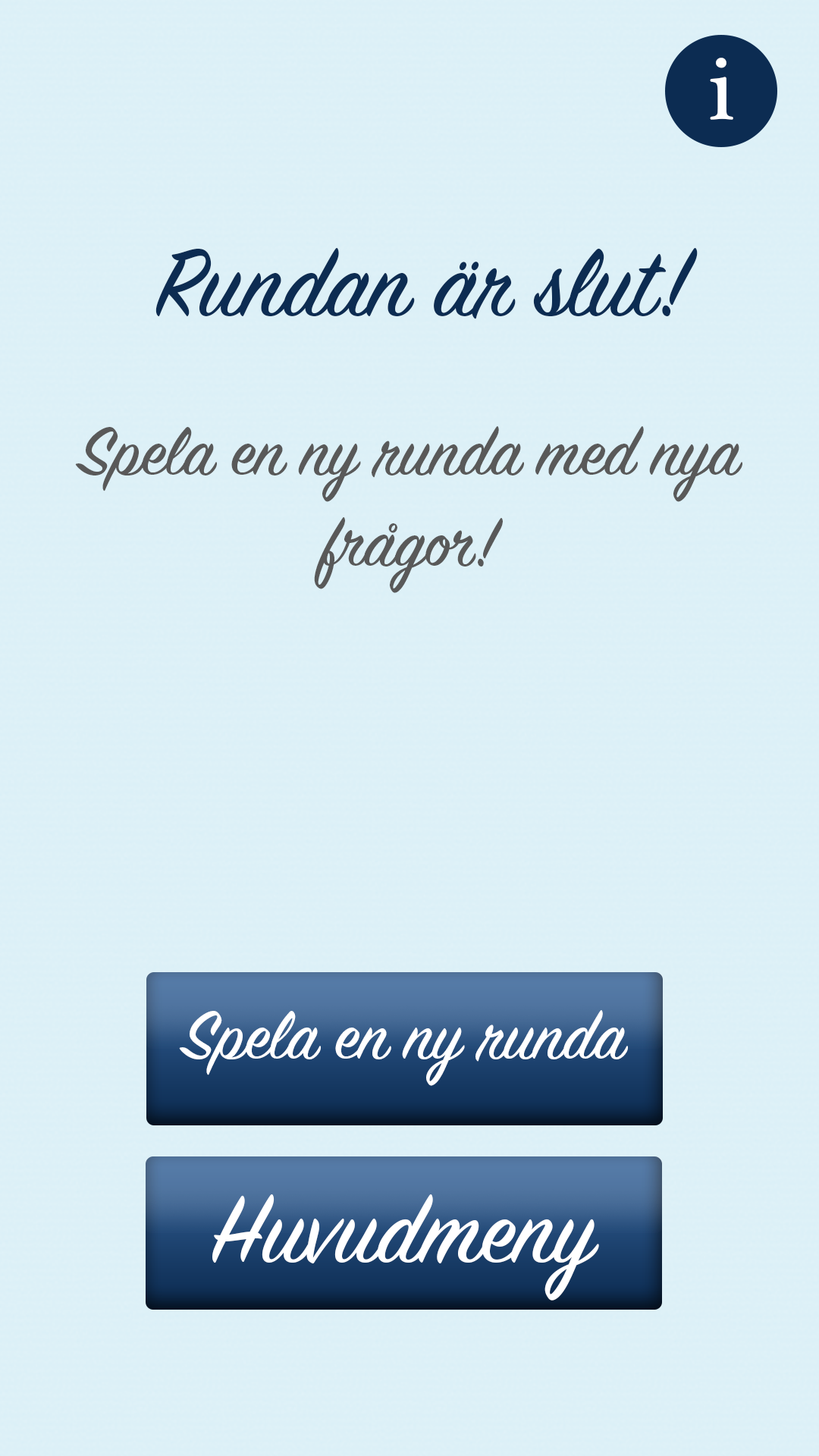
<style>
.page{position:relative;width:819px;height:1456px;background:#dcf0f7}
.page>*{position:absolute;margin:0}
.t1{font:91px "PlantagenetCherokee";color:#ffffff}
.t2{font:106.2px "SignPainter-HouseScript";color:#0c2c52}
.t3{font:75.8px "SignPainter-HouseScript";color:#595959}
.t4{font:75.8px "SignPainter-HouseScript";color:#ffffff}
.t5{font:106.2px "SignPainter-HouseScript";color:#ffffff}
</style>
<div class="page">
<p class="t1" style="left:710px;top:58px;width:23px;height:62px">i</p>
<p class="t2" style="left:155px;top:248px;width:543px;height:71px">Rundan är slut!</p>
<p class="t3" style="left:75px;top:426px;width:667px;height:167px;text-align:center">Spela en ny runda med nya frågor!</p>
<p class="t4" style="left:179px;top:1010px;width:449px;height:76px">Spela en ny runda</p>
<p class="t5" style="left:212px;top:1194px;width:387px;height:107px">Huvudmeny</p>
</div>
